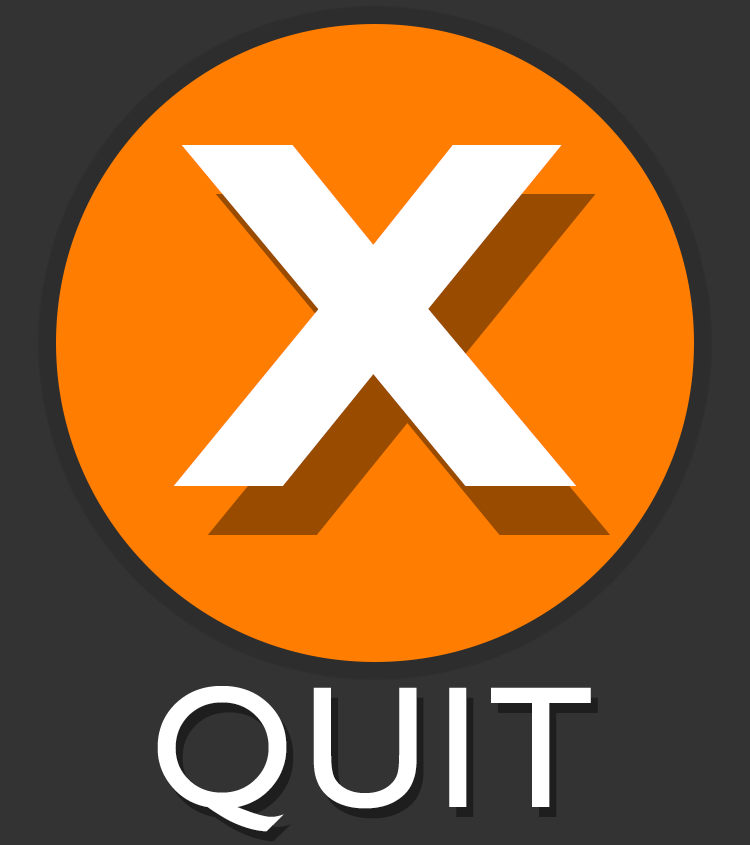
<style>
.page{position:relative;width:750px;height:845px;background:#333333}
.page>*{position:absolute;margin:0}
.t1{font:500px "GillSansMT-Bold";letter-spacing:0.05em;color:#ffffff}
.t2{font:175px "GillSansMT";letter-spacing:0.05em;color:#ffffff}
</style>
<div class="page">
<p class="t1" style="left:174px;top:145px;width:402px;height:341px">X</p>
<p class="t2" style="left:157px;top:686px;width:434px;height:146px">QUIT</p>
</div>
